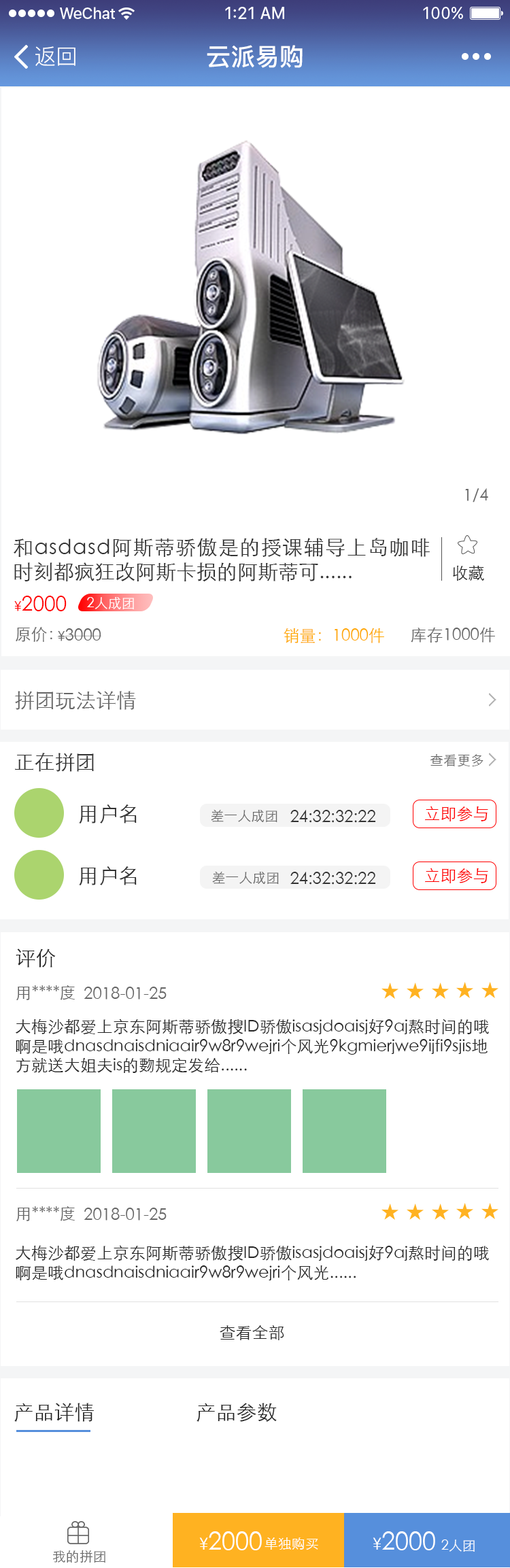
<style>
.page{position:relative;width:510px;height:1568px;background:#ffffff}
.page>*{position:absolute;margin:0}
.t1{font:21.8px "PingFang-SC-Regular";color:#ffffff}
.t2{font:24.5px "PingFang-SC-Bold";color:#ffffff}
.t3{font:16.3px "STXihei";color:#666666}
.t4{font:20.4px "STXihei";color:#333333}
.t5{font:16.3px "STXihei";color:#262626}
.t6{font:20.4px "STXihei";color:#ff0000}
.t7{font:13.6px "STXihei";color:#ff0000}
.t8{font:13.6px "STXihei";color:#ffffff}
.t9{font:13.6px "STXihei";color:#666666}
.t10{font:16.3px "STXihei";color:#ffa800}
.t11{font:20.4px "STXihei";color:#666666}
.t12{font:16.3px "STXihei";color:#333333}
.t13{font:16.3px "STXihei";color:#ff0000}
.t14{font:20.4px "STXihei";color:#262626}
.t15{font:24.5px "STXihei";color:#ffffff}
.t16{font:16.3px "STXihei";color:#ffffff}
</style>
<div class="page">
<p class="t1" style="left:35px;top:46px;width:40px;height:20px">返回</p>
<p class="t2" style="left:207px;top:45px;width:96px;height:23px">云派易购</p>
<p class="t3" style="left:465px;top:488px;width:23px;height:14px">1/4</p>
<p class="t4" style="left:14px;top:538px;width:416px;height:43px;text-align:justify">和asdasd阿斯蒂骄傲是的授课辅导上岛咖啡时刻都疯狂改阿斯卡损的阿斯蒂可......</p>
<p class="t5" style="left:453px;top:565px;width:31px;height:16px">收藏</p>
<p class="t6" style="left:14px;top:596px;width:53px;height:15px"><span class="t7">¥</span>2000</p>
<p class="t8" style="left:87px;top:597px;width:47px;height:12px">2人成团</p>
<p class="t3" style="left:16px;top:627px;width:36px;height:15px">原价：</p>
<p class="t3" style="left:57px;top:628px;width:44px;height:13px"><span class="t9">¥</span>3000</p>
<p class="t10" style="left:284px;top:628px;width:100px;height:15px">销量：1000件</p>
<p class="t3" style="left:411px;top:627px;width:84px;height:16px">库存1000件</p>
<p class="t11" style="left:15px;top:691px;width:121px;height:19px">拼团玩法详情</p>
<p class="t4" style="left:15px;top:753px;width:79px;height:19px">正在拼团</p>
<p class="t9" style="left:430px;top:754px;width:53px;height:13px">查看更多</p>
<p class="t4" style="left:79px;top:804px;width:58px;height:19px">用户名</p>
<p class="t9" style="left:211px;top:810px;width:66px;height:12px">差一人成团</p>
<p class="t12" style="left:290px;top:810px;width:86px;height:13px">24:32:32:22</p>
<p class="t13" style="left:425px;top:806px;width:63px;height:15px">立即参与</p>
<p class="t4" style="left:79px;top:866px;width:58px;height:19px">用户名</p>
<p class="t13" style="left:425px;top:868px;width:63px;height:15px">立即参与</p>
<p class="t9" style="left:212px;top:872px;width:67px;height:12px">差一人成团</p>
<p class="t12" style="left:290px;top:872px;width:86px;height:13px">24:32:32:22</p>
<p class="t14" style="left:16px;top:949px;width:40px;height:19px">评价</p>
<p class="t3" style="left:16px;top:985px;width:59px;height:15px">用****度</p>
<p class="t3" style="left:84px;top:987px;width:83px;height:13px">2018-01-25</p>
<p class="t5" style="left:16px;top:1019px;width:473px;height:54px">大梅沙都爱上京东阿斯蒂骄傲搜ID骄傲isasjdoaisj好9aj熬时间的哦啊是哦dnasdnaisdniaair9w8r9wejri个风光9kgmierjwe9ijfi9sjis地方就送大姐夫is的覅规定发给......</p>
<p class="t3" style="left:16px;top:1206px;width:59px;height:15px">用****度</p>
<p class="t3" style="left:84px;top:1208px;width:83px;height:13px">2018-01-25</p>
<p class="t5" style="left:16px;top:1245px;width:473px;height:36px">大梅沙都爱上京东阿斯蒂骄傲搜ID骄傲isasjdoaisj好9aj熬时间的哦啊是哦dnasdnaisdniaair9w8r9wejri个风光......</p>
<p class="t5" style="left:220px;top:1325px;width:64px;height:15px">查看全部</p>
<p class="t14" style="left:14px;top:1403px;width:80px;height:19px">产品详情</p>
<p class="t14" style="left:197px;top:1403px;width:80px;height:19px">产品参数</p>
<p class="t15" style="left:199px;top:1531px;width:63px;height:19px"><span class="t16">¥</span>2000</p>
<p class="t8" style="left:265px;top:1537px;width:53px;height:13px">单独购买</p>
<p class="t15" style="left:373px;top:1531px;width:62px;height:19px"><span class="t16">¥</span>2000</p>
<p class="t8" style="left:441px;top:1539px;width:34px;height:13px">2人团</p>
<p class="t9" style="left:53px;top:1550px;width:52px;height:13px">我的拼团</p>
</div>
